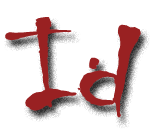
<style>
.page{position:relative;width:150px;height:130px;background:#ffffff}
.page>*{position:absolute;margin:0}
.t1{font:131.3px "Chiller-Regular";letter-spacing:-0.025em;color:#992122;scale:1.09 1}
</style>
<div class="page">
<p class="t1" style="left:5px;top:17px;width:136px;height:101px">Id</p>
</div>
